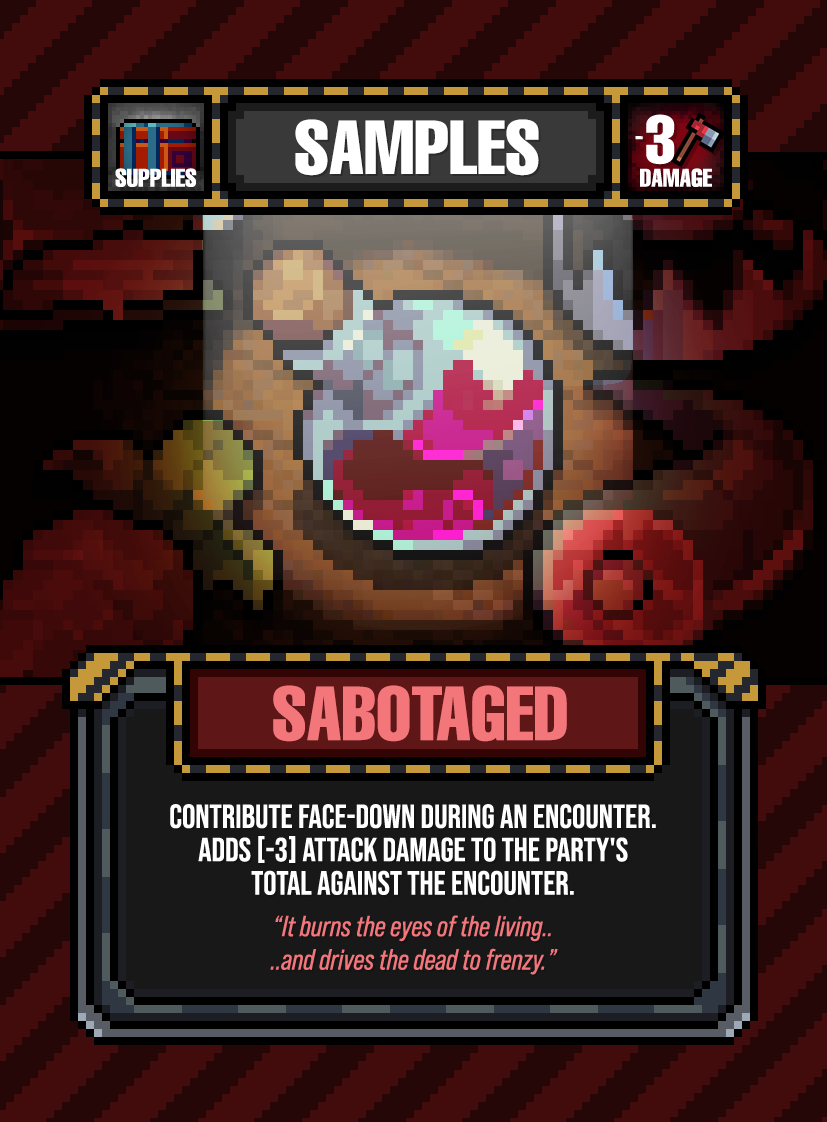
<style>
.page{position:relative;width:827px;height:1122px}
.page>*{position:absolute;margin:0}
.t1{font:75px "HelveticaLTPro-Compressed";color:#ffffff}
.t2{font:75px "HelveticaLTPro-Compressed";color:#f3767b}
.t3{font:33.3px/33.3px "BebasNeue-Regular";color:#ffffff}
.t4{font:29.2px/33.3px "BebasNeuePro-Italic";color:#f3767b}
</style>
<div class="page">
<p class="t1" style="left:295px;top:119px;width:244px;height:57px">SAMPLES</p>
<p class="t2" style="left:273px;top:685px;width:294px;height:57px">SABOTAGED</p>
<p class="t3" style="left:170px;top:804px;width:486px;height:171px;text-align:center">CONTRIBUTE FACE-DOWN DURING AN ENCOUNTER.<br>ADDS [-3] ATTACK DAMAGE TO THE PARTY'S<br>TOTAL AGAINST THE encounter.<br><br><span class="t4">“It burns the eyes of the living..<br>..and drives the dead to frenzy.”</span></p>
</div>
